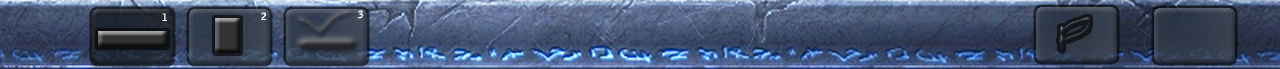
<style>
.page{position:relative;width:1280px;height:69px}
.page>*{position:absolute;margin:0}
.t1{font:10px "BellGothicStd-Bold";color:#fefeff}
</style>
<div class="page">
<p class="t1" style="left:162px;top:13px;width:5px;height:8px">1</p>
<p class="t1" style="left:261px;top:12px;width:5px;height:8px">2</p>
<p class="t1" style="left:358px;top:10px;width:6px;height:9px">3</p>
</div>
